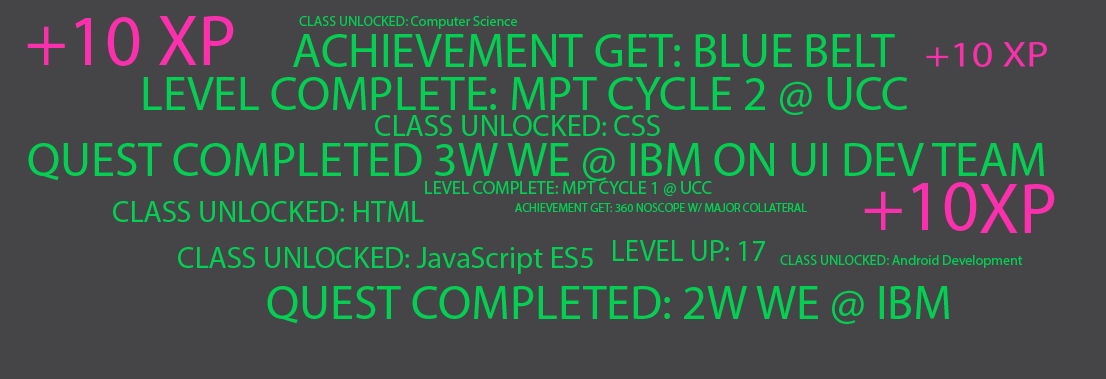
<style>
.page{position:relative;width:1106px;height:379px;background:#454547}
.page>*{position:absolute;margin:0}
.t1{font:14px "MyriadPro-Regular";color:#03cf52}
.t2{font:48px "MyriadPro-Regular";color:#03cf52}
.t3{font:30px "MyriadPro-Regular";color:#03cf52}
.t4{font:18px "MyriadPro-Regular";color:#03cf52}
.t5{font:12px "MyriadPro-Regular";color:#03cf52}
.t6{font:30.4px "MyriadPro-Regular";color:#03cf52;scale:0.96 1}
</style>
<div class="page">
<p class="t1" style="left:299px;top:16px;width:218px;height:13px">CLASS UNLOCKED: Computer Science</p>
<p class="t2" style="left:293px;top:34px;width:602px;height:33px">ACHIEVEMENT GET: BLUE BELT</p>
<p class="t2" style="left:143px;top:77px;width:764px;height:38px">LEVEL COMPLETE: MPT CYCLE 2 @ UCC</p>
<p class="t3" style="left:375px;top:115px;width:285px;height:21px">CLASS UNLOCKED: CSS</p>
<p class="t2" style="left:28px;top:143px;width:1016px;height:38px">QUEST COMPLETED 3W WE @ IBM ON UI DEV TEAM</p>
<p class="t4" style="left:425px;top:181px;width:287px;height:15px">LEVEL COMPLETE: MPT CYCLE 1 @ UCC</p>
<p class="t3" style="left:113px;top:201px;width:311px;height:21px">CLASS UNLOCKED: HTML</p>
<p class="t5" style="left:515px;top:203px;width:292px;height:9px">ACHIEVEMENT GET: 360 NOSCOPE W/ MAJOR COLLATERAL</p>
<p class="t6" style="left:613px;top:240px;width:152px;height:21px">LEVEL UP: 17</p>
<p class="t3" style="left:178px;top:247px;width:415px;height:27px">CLASS UNLOCKED: JavaScript ES5</p>
<p class="t1" style="left:780px;top:255px;width:243px;height:13px">CLASS UNLOCKED: Android Development</p>
<p class="t2" style="left:267px;top:286px;width:682px;height:38px">QUEST COMPLETED: 2W WE @ IBM</p>
</div>
